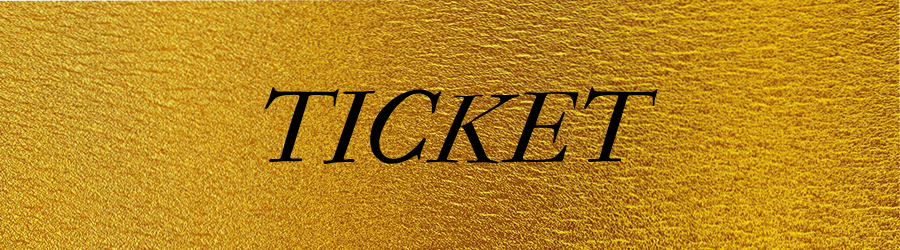
<style>
.page{position:relative;width:900px;height:250px}
.page>*{position:absolute;margin:0}
.t1{font:100px "IM_FELL_French_Canon_PRO_Italic";color:#000000}
</style>
<div class="page">
<p class="t1" style="left:265px;top:87px;width:393px;height:78px">TICKET</p>
</div>
